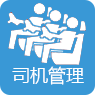
<style>
.page{position:relative;width:95px;height:95px;background:#3998d6}
.page>*{position:absolute;margin:0}
.t1{font:18px "MicrosoftYaHei";color:#ffffff}
</style>
<div class="page">
<p class="t1" style="left:12px;top:66px;width:72px;height:19px">司机管理</p>
</div>
